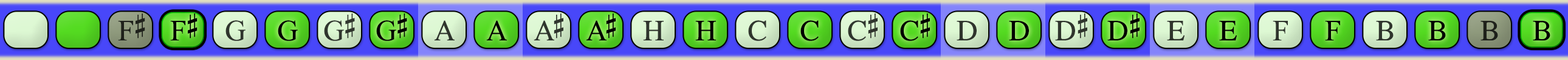
<style>
.page{position:relative;width:1568px;height:60px}
.page>*{position:absolute;margin:0}
.t1{font:29.2px "OpusChords";color:#1f211b}
.t2{font:29.2px "OpusChords";color:#000000}
.t3{font:29.2px "OpusChords";letter-spacing:-0.025em;color:#2f352d}
.t4{font:29.2px "OpusChords";letter-spacing:-0.025em;color:#000000}
.t5{font:29.2px "OpusChords";letter-spacing:-0.1em;color:#2f352d}
.t6{font:29.2px "OpusChords";letter-spacing:-0.1em;color:#000000}
.t7{font:29.2px "OpusChords";color:#2f352d}
.t8{font:29.2px "OpusChords";color:#30352d}
.t9{font:29.2px "OpusChords";color:#30362e}
</style>
<div class="page">
<p class="t1" style="left:118px;top:13px;width:27px;height:27px">F#</p>
<p class="t2" style="left:170px;top:13px;width:28px;height:27px">F#</p>
<p class="t3" style="left:324px;top:13px;width:31px;height:28px">G#</p>
<p class="t4" style="left:376px;top:13px;width:31px;height:28px">G#</p>
<p class="t5" style="left:534px;top:13px;width:29px;height:27px">A#</p>
<p class="t6" style="left:586px;top:13px;width:30px;height:27px">A#</p>
<p class="t7" style="left:848px;top:13px;width:30px;height:28px">C#</p>
<p class="t2" style="left:900px;top:13px;width:30px;height:28px">C#</p>
<p class="t7" style="left:1055px;top:13px;width:32px;height:27px">D#</p>
<p class="t2" style="left:1107px;top:13px;width:33px;height:27px">D#</p>
<p class="t7" style="left:225px;top:20px;width:21px;height:21px">G</p>
<p class="t2" style="left:278px;top:20px;width:20px;height:21px">G</p>
<p class="t7" style="left:434px;top:20px;width:21px;height:20px">A</p>
<p class="t2" style="left:486px;top:20px;width:21px;height:20px">A</p>
<p class="t8" style="left:643px;top:21px;width:21px;height:19px">H</p>
<p class="t2" style="left:695px;top:21px;width:21px;height:19px">H</p>
<p class="t9" style="left:748px;top:20px;width:18px;height:21px">C</p>
<p class="t2" style="left:800px;top:20px;width:19px;height:21px">C</p>
<p class="t7" style="left:957px;top:21px;width:20px;height:19px">D</p>
<p class="t2" style="left:1009px;top:21px;width:20px;height:19px">D</p>
<p class="t9" style="left:1167px;top:21px;width:18px;height:19px">E</p>
<p class="t2" style="left:1219px;top:21px;width:18px;height:19px">E</p>
<p class="t9" style="left:1273px;top:21px;width:15px;height:19px">F</p>
<p class="t2" style="left:1325px;top:21px;width:15px;height:19px">F</p>
<p class="t8" style="left:1376px;top:21px;width:18px;height:19px">B</p>
<p class="t2" style="left:1428px;top:21px;width:18px;height:19px">B</p>
<p class="t1" style="left:1480px;top:21px;width:18px;height:19px">B</p>
<p class="t2" style="left:1533px;top:21px;width:17px;height:19px">B</p>
</div>
